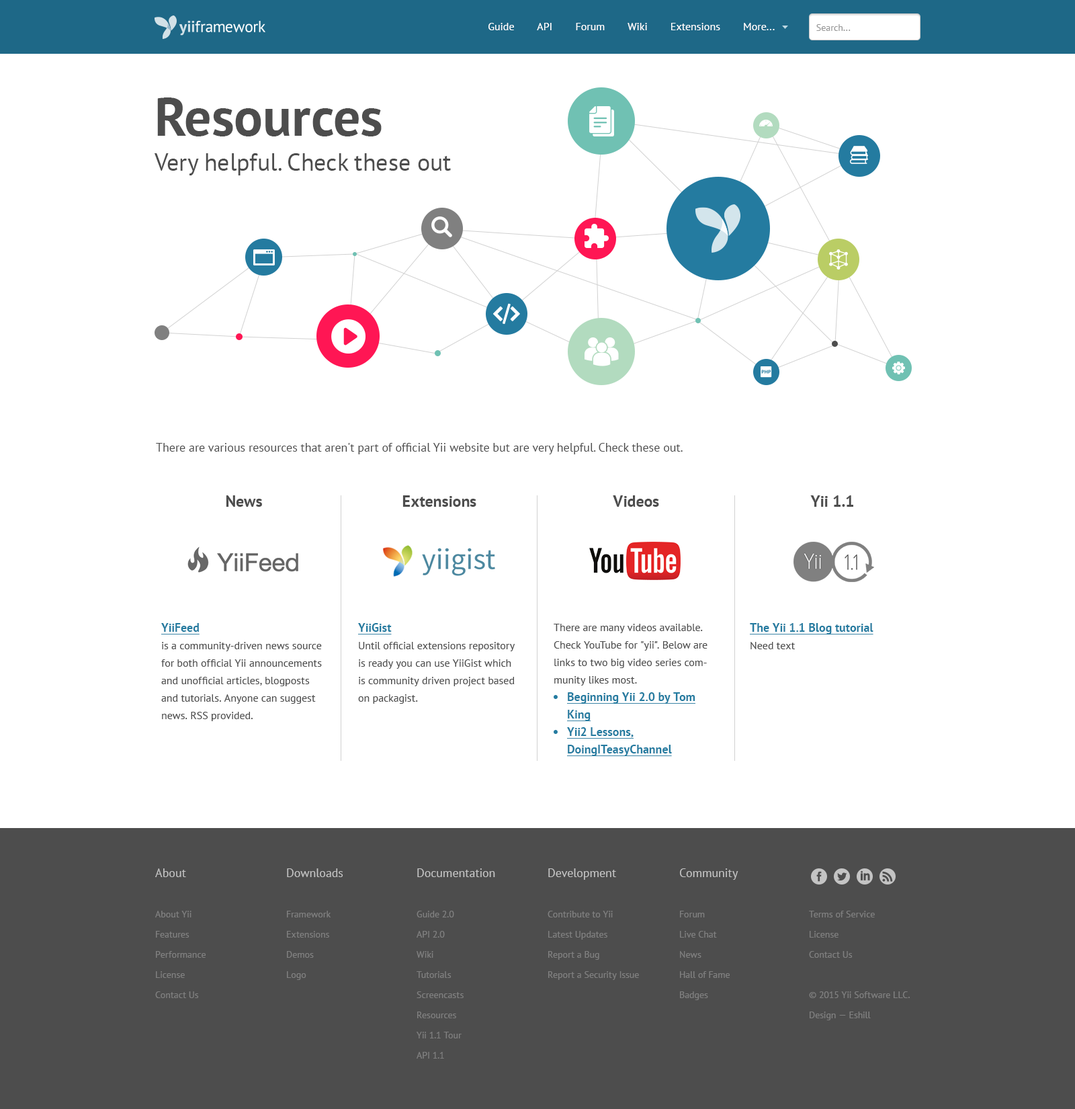
<style>
.page{position:relative;width:1075px;height:1109px;background:#ffffff}
.page>*{position:absolute;margin:0}
.t1{font:10.8px "PTSans-Regular";color:#ffffff}
.t2{font:9.4px "PTSans-Regular";color:#999999}
.t3{font:53.8px "PTSans-Bold";color:#4d4d4d}
.t4{font:24.2px "PTSans-Regular";color:#4d4d4d}
.t5{font:12.1px "PTSans-Regular";color:#4d4d4d}
.t6{font:16.1px "PTSans-Bold";color:#4d4d4d}
.t7{font:10.8px/17.5px "PTSans-Regular";color:#4d4d4d}
.t8{font:12.1px/17.5px "PTSans-Bold";color:#247ba0;text-decoration:underline}
.t9{font:9.4px/20.2px "PTSans-Regular";color:#808080}
.t10{font:12.1px/20.2px "PTSans-Regular";color:#c4c4c4}
</style>
<div class="page">
<p class="t1" style="left:489px;top:23px;width:286px;height:7px">Guide        API        Forum        Wiki        Extensions        More...</p>
<p class="t2" style="left:817px;top:24px;width:34px;height:7px">Search...</p>
<p class="t3" style="left:157px;top:97px;width:225px;height:39px">Resources</p>
<p class="t4" style="left:154px;top:153px;width:297px;height:22px">Very helpful. Check these out</p>
<p class="t5" style="left:156px;top:443px;width:527px;height:11px">There are various resources that aren't part of official Yii website but are very helpful. Check these out.</p>
<p class="t6" style="left:226px;top:495px;width:36px;height:12px">News</p>
<p class="t6" style="left:403px;top:495px;width:73px;height:12px">Extensions</p>
<p class="t6" style="left:613px;top:495px;width:46px;height:12px">Videos</p>
<p class="t6" style="left:811px;top:495px;width:43px;height:12px">Yii 1.1</p>
<p class="t7" style="left:161px;top:623px;width:161px;height:98px"><span class="t8">YiiFeed<br></span>is a community-driven news source for both official Yii announcements and unofficial articles, blogposts and tutorials. Anyone can suggest news. RSS provided.</p>
<p class="t7" style="left:358px;top:623px;width:157px;height:81px"><span class="t8">YiiGist<br></span>Until official extensions repository is ready you can use YiiGist which is community driven project based on packagist.</p>
<p class="t7" style="left:554px;top:624px;width:154px;height:132px">There are many videos available. Check YouTube for "yii". Below are links to two big video series community likes most.<br><span class="t8">Beginning Yii 2.0 by Tom King<br>Yii2 Lessons, DoingITeasyChannel</span></p>
<p class="t8" style="left:750px;top:623px;width:124px;height:26px">The Yii 1.1 Blog tutorial<br><span class="t7">Need text</span></p>
<p class="t9" style="left:155px;top:868px;width:51px;height:130px"><span class="t10">About<br></span><br>About Yii<br>Features<br>Performance<br>License<br>Contact Us</p>
<p class="t9" style="left:287px;top:868px;width:56px;height:112px"><span class="t10">Downloads<br></span><br>Framework<br>Extensions<br>Demos<br>Logo</p>
<p class="t9" style="left:417px;top:868px;width:78px;height:191px"><span class="t10">Documentation<br></span><br>Guide 2.0<br>API 2.0<br>Wiki<br>Tutorials<br>Screencasts<br>Resources<br>Yii 1.1 Tour<br>API 1.1</p>
<p class="t9" style="left:548px;top:868px;width:91px;height:112px"><span class="t10">Development<br></span><br>Contribute to Yii<br>Latest Updates<br>Report a Bug<br>Report a Security Issue</p>
<p class="t9" style="left:679px;top:868px;width:60px;height:132px"><span class="t10">Community<br></span><br>Forum<br>Live Chat<br>News<br>Hall of Fame<br>Badges</p>
<p class="t9" style="left:809px;top:911px;width:101px;height:109px">Terms of Service<br>License<br>Contact Us<br><br>© 2015 Yii Software LLC. Design — Eshill</p>
</div>
